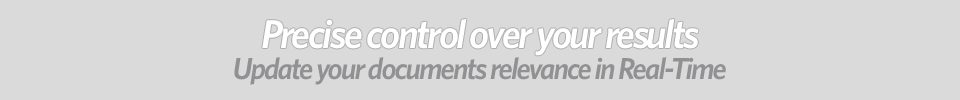
<style>
.page{position:relative;width:960px;height:100px;background:#dadada}
.page>*{position:absolute;margin:0}
.t1{font:40.3px "Whitney-SemiboldItalic";letter-spacing:-0.06em;color:#ffffff}
.t2{font:30.3px "Whitney-SemiboldItalic";letter-spacing:-0.06em;color:#919092}
</style>
<div class="page">
<p class="t1" style="left:262px;top:19px;width:437px;height:37px">Precise control over your results</p>
<p class="t2" style="left:234px;top:57px;width:492px;height:28px">Update your documents relevance in Real-Time</p>
</div>
